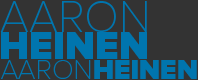
<style>
.page{position:relative;width:198px;height:80px;background:#333333}
.page>*{position:absolute;margin:0}
.t1{font:45.4px "ProximaNovaT-Thin";color:#0075ae}
.t2{font:40px "ProximaNova-Black";color:#0075ae}
.t3{font:28px "ProximaNova-Black";color:#0075ae}
.t4{font:28px "ProximaNovaT-Thin";color:#0075ae}
</style>
<div class="page">
<p class="t1" style="left:0px;top:1px;width:147px;height:31px">AARON</p>
<p class="t2" style="left:1px;top:32px;width:146px;height:27px">HEINEN</p>
<p class="t3" style="left:1px;top:60px;width:196px;height:19px"><span class="t4">AARON</span>HEINEN</p>
</div>
